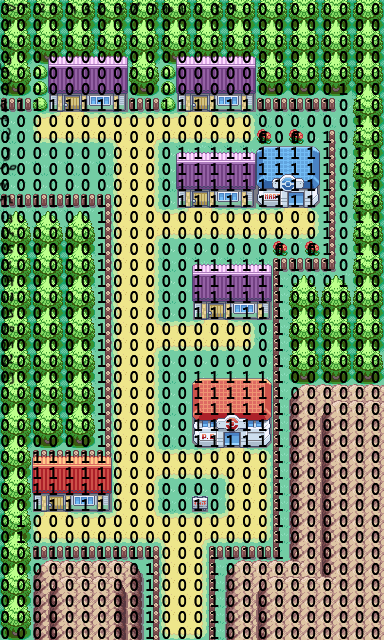
<style>
.page{position:relative;width:384px;height:640px}
.page>*{position:absolute;margin:0}
.t1{font:18.6px/16px "CourierNewPS-BoldMT";letter-spacing:0.35em;color:#000000;scale:0.91 1}
</style>
<div class="page">
<p class="t1" style="left:1px;top:3px;width:379px;height:636px">000000000000000000000000<br>000000000000000000000000<br>000000000000000000000000<br>000000000000000000000000<br>000000000000000000000000<br>000000000000000000000100<br>111111111111111111111010<br>000000000000000000000010<br>000000000000000000001010<br>000000000001111111111010<br>000000000001111111111010<br>000000000001111111111010<br>111111100001111111111010<br>000000100000000000001010<br>000000100000000000001010<br>000000100000000000001010<br>000000100000111111111010<br>000000100000111111000100<br>000000100000111111000000<br>000000100000111111000000<br>000000100000000001000000<br>000000100000000001000000<br>000000100000000001000000<br>000000100000111111000000<br>000000100000111111000000<br>000000100000111111000000<br>000000100000111111000000<br>000000100000111111000000<br>001111100000000001000000<br>001111100000000001000000<br>001111100000000001000000001111100000100001000000<br>010000000000000001000000<br>010000000000000001000000<br>001111111100011111000000<br>000000000100010000000000<br>000000000100010000000000<br>000000000100010000000000<br>000000000100010000000000<br>000000000100010000000000</p>
<p class="t1" style="left:1px;top:3px;width:379px;height:636px">000000000000000000000000<br>000000000000000000000000<br>000000000000000000000000<br>000000000000000000000000<br>000000000000000000000000<br>000000000000000000000100<br>111111111111111111111010<br>000000000000000000000010<br>0000000000000000f0f01010<br>000000000001111111111010<br>000000000001111111111010<br>000000000001111111111010<br>111111100001111111111010<br>000000100000000000001010<br>000000100000000000001010<br>00000010000000000f0f1010<br>000000100000111111111010<br>000000100000111111000100<br>000000100000111111000000<br>000000100000111111000000<br>000000100000000001000000<br>000000100000000001000000<br>000000100000000001000000<br>000000100000111111000000<br>000000100000111111000000<br>000000100000111111000000<br>000000100000111111000000<br>000000100000111111000000<br>001111100000000001000000<br>001111100000000001000000<br>001111100000000001000000001111100000100001000000<br>010000000000000001000000<br>010000000000000001000000<br>001111111100011111000000<br>000000000100010000000000<br>000000000100010000000000<br>000000000100010000000000<br>000000000100010000000000<br>000000000100010000000000</p>
</div>
